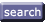
<style>
.page{position:relative;width:45px;height:22px;background:#666699}
.page>*{position:absolute;margin:0}
.t1{font:11px "Verdana";letter-spacing:-0.01em;color:#ffffff}
</style>
<div class="page">
<p class="t1" style="left:4px;top:7px;width:37px;height:10px">search</p>
</div>
